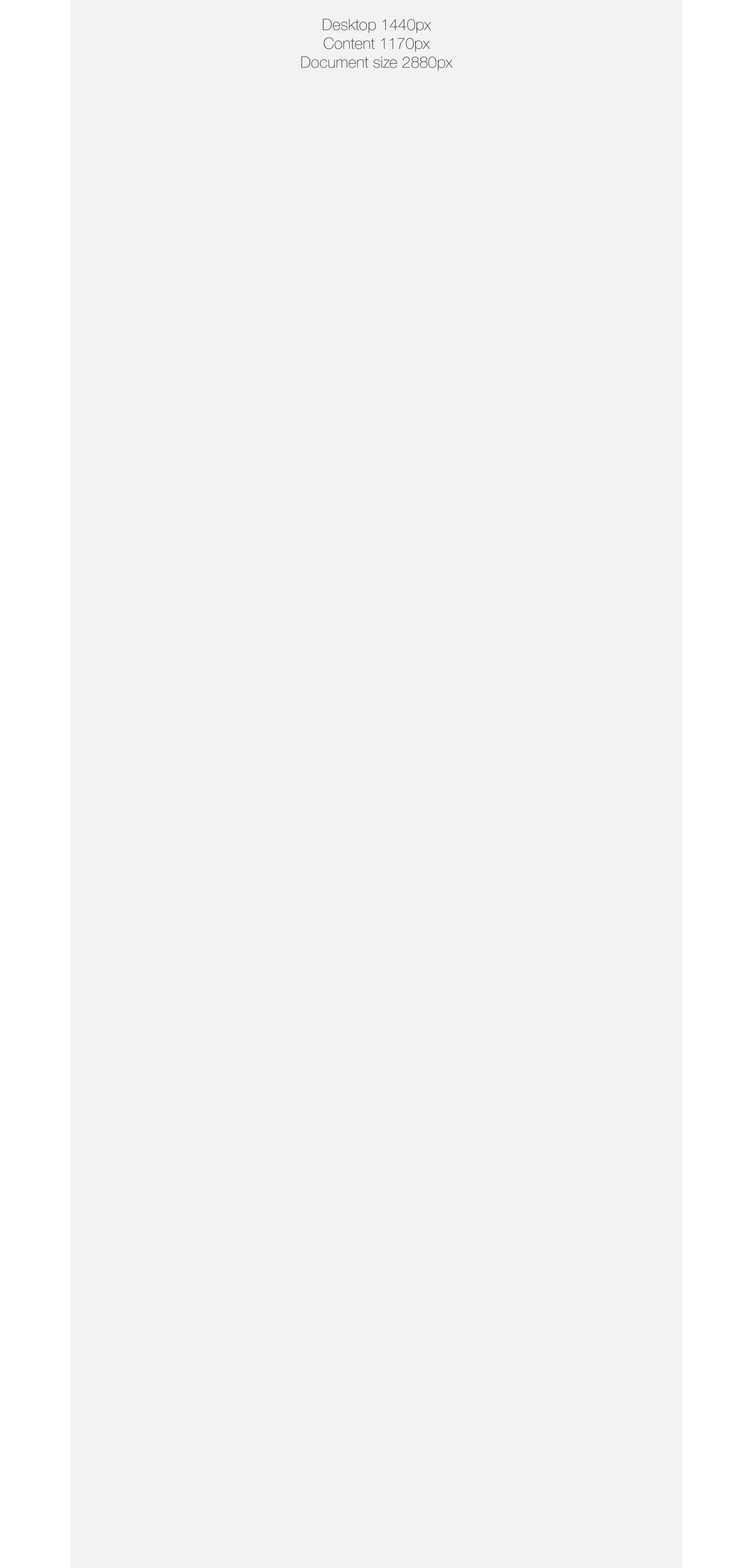
<style>
.page{position:relative;width:753px;height:1568px;background:#f2f2f2}
.page>*{position:absolute;margin:0}
.t1{font:15.7px "HelveticaNeue-Thin";color:#373737}
</style>
<div class="page">
<p class="t1" style="left:301px;top:19px;width:151px;height:52px;text-align:center">Desktop 1440px<br>Content 1170px<br>Document size 2880px</p>
</div>
